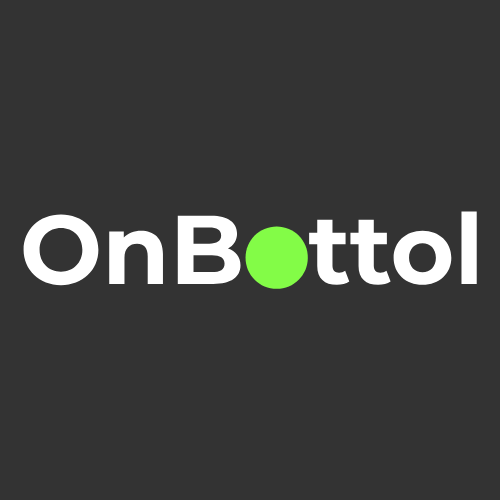
<style>
.page{position:relative;width:500px;height:500px;background:#333333}
.page>*{position:absolute;margin:0}
.t1{font:97.7px "Montserrat-Bold";color:#ffffff}
</style>
<div class="page">
<p class="t1" style="left:23px;top:211px;width:454px;height:75px">OnBottol</p>
</div>
